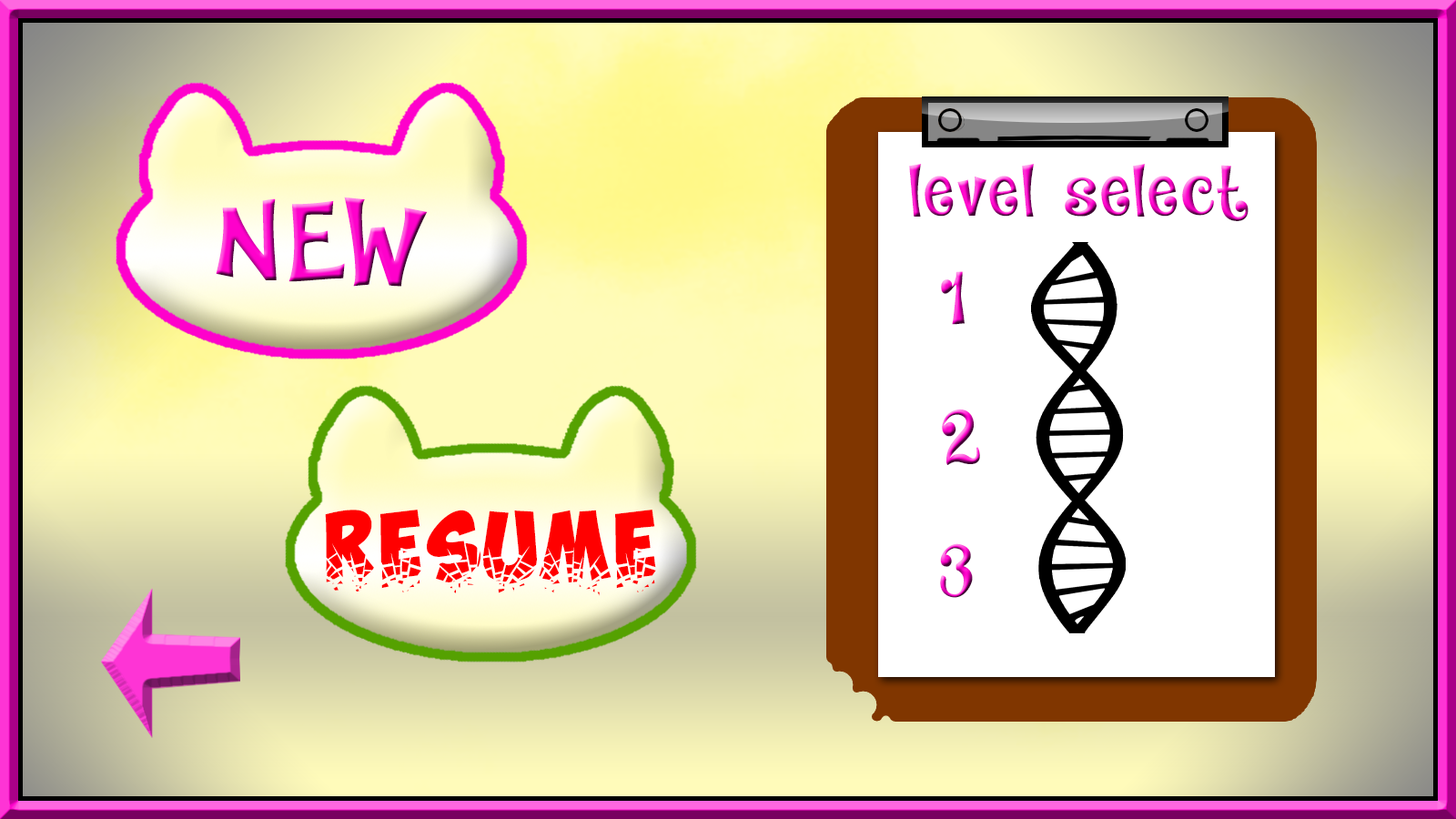
<style>
.page{position:relative;width:1456px;height:819px}
.page>*{position:absolute;margin:0}
.t1{font:68.1px "DKJambo";letter-spacing:0.05em}
.t2{font:113.9px "DKJambo";letter-spacing:0.05em}
.t3{font:68.2px "ObelixProBroken";letter-spacing:0.05em;color:#ff0000}
</style>
<div class="page">
<p class="t1" style="left:909px;top:164px;width:340px;height:57px">level select</p>
<p class="t2" style="left:216px;top:197px;width:212px;height:90px">NEW</p>
<p class="t1" style="left:941px;top:271px;width:24px;height:54px">1</p>
<p class="t1" style="left:942px;top:409px;width:38px;height:56px">2</p>
<p class="t3" style="left:325px;top:510px;width:331px;height:86px">resume</p>
<p class="t1" style="left:940px;top:543px;width:33px;height:55px">3</p>
</div>
